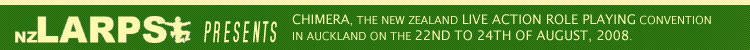
<style>
.page{position:relative;width:750px;height:50px}
.page>*{position:absolute;margin:0}
.t1{font:11px "LucidaSans";color:#fffdae}
.t2{font:13px "LucidaSans";color:#fffdae}
</style>
<div class="page">
<p class="t1" style="left:292px;top:14px;width:419px;height:28px"><span class="t2">CHIMERA</span>, THE NEW ZEALAND <span class="t2">LIVE ACTION ROLE PLAYING</span> CONVENTION <br>IN AUCKLAND ON THE <span class="t2">22ND TO 24TH OF AUGUST, 2008</span>.</p>
</div>
